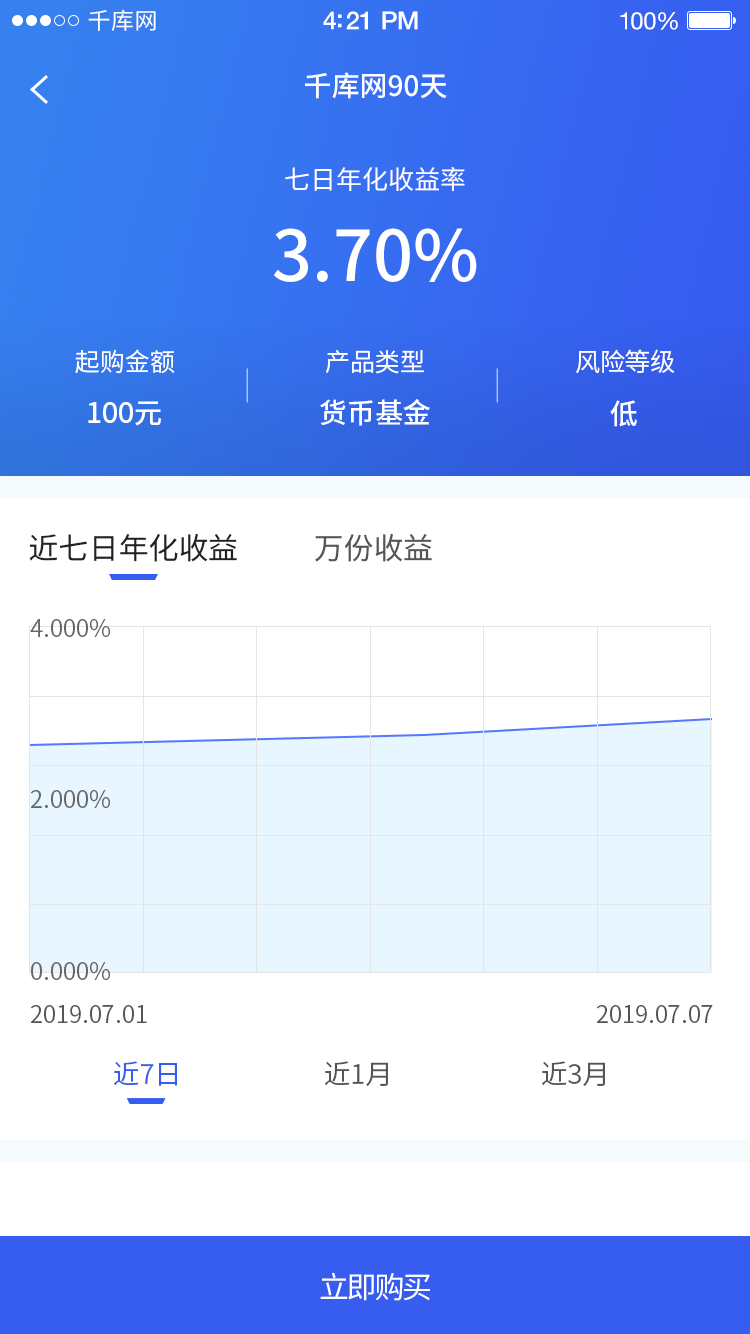
<style>
.page{position:relative;width:750px;height:1334px;background:#ffffff}
.page>*{position:absolute;margin:0}
.t1{font:23px "SourceHanSansCN-Regular";letter-spacing:0.02em;color:#ffffff}
.t2{font:25px "HelveticaNeue-Medium";letter-spacing:-0.02em;color:#ffffff}
.t3{font:24px "HelveticaNeue";letter-spacing:-0.02em;color:#ffffff}
.t4{font:28px "SourceHanSansCN-Medium";color:#ffffff}
.t5{font:26px "SourceHanSansCN-Regular";color:#ffffff}
.t6{font:70px "SourceHanSansCN-Medium";color:#ffffff}
.t7{font:25px "SourceHanSansCN-Normal";color:#ffffff}
.t8{font:25.1px "SourceHanSansCN-Normal";color:#ffffff}
.t9{font:25.3px "SourceHanSansCN-Normal";color:#ffffff}
.t10{font:28.1px "SourceHanSansCN-Medium";color:#ffffff}
.t11{font:28.3px "SourceHanSansCN-Medium";color:#ffffff}
.t12{font:30px "SourceHanSansCN-Regular";color:#222222}
.t13{font:30px "SourceHanSansCN-Regular";color:#555555}
.t14{font:24px "SourceHanSansCN-Normal";color:#666666}
.t15{font:24px "SourceHanSansCN-Normal";color:#555555}
.t16{font:27px "SourceHanSansCN-Normal";color:#365cf0}
.t17{font:27px "SourceHanSansCN-Normal";color:#555555}
.t18{font:30px "SourceHanSansCN-Regular";letter-spacing:-0.075em;color:#ffffff}
</style>
<div class="page">
<p class="t1" style="left:88px;top:9px;width:68px;height:22px">千库网</p>
<p class="t2" style="left:323px;top:11px;width:95px;height:19px">4:21 PM</p>
<p class="t3" style="left:620px;top:12px;width:58px;height:18px">100%</p>
<p class="t4" style="left:305px;top:72px;width:142px;height:27px">千库网90天</p>
<p class="t5" style="left:285px;top:167px;width:180px;height:24px">七日年化收益率</p>
<p class="t6" style="left:274px;top:228px;width:203px;height:54px">3.70%</p>
<p class="t7" style="left:75px;top:349px;width:100px;height:25px">起购金额</p>
<p class="t8" style="left:325px;top:350px;width:99px;height:24px">产品类型</p>
<p class="t9" style="left:576px;top:349px;width:99px;height:25px">风险等级</p>
<p class="t4" style="left:88px;top:401px;width:73px;height:25px">100元</p>
<p class="t10" style="left:320px;top:399px;width:110px;height:27px">货币基金</p>
<p class="t11" style="left:610px;top:400px;width:27px;height:27px">低</p>
<p class="t12" style="left:29px;top:533px;width:208px;height:29px">近七日年化收益</p>
<p class="t13" style="left:315px;top:533px;width:117px;height:29px">万份收益</p>
<p class="t14" style="left:30px;top:619px;width:80px;height:18px">4.000%</p>
<p class="t14" style="left:30px;top:790px;width:80px;height:18px">2.000%</p>
<p class="t14" style="left:31px;top:962px;width:79px;height:18px">0.000%</p>
<p class="t15" style="left:30px;top:1005px;width:117px;height:18px">2019.07.01</p>
<p class="t15" style="left:596px;top:1005px;width:117px;height:18px">2019.07.07</p>
<p class="t16" style="left:114px;top:1061px;width:63px;height:25px">近7日</p>
<p class="t17" style="left:325px;top:1061px;width:63px;height:25px">近1月</p>
<p class="t17" style="left:542px;top:1061px;width:63px;height:25px">近3月</p>
<p class="t18" style="left:320px;top:1272px;width:110px;height:29px">立即购买</p>
</div>
